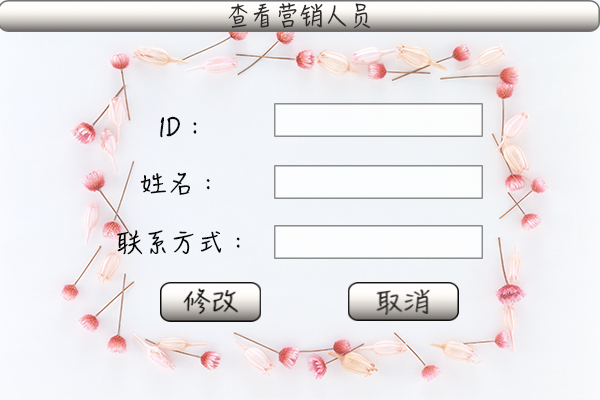
<style>
.page{position:relative;width:600px;height:400px}
.page>*{position:absolute;margin:0}
.t1{font:24px "HanziPenSC-W5";letter-spacing:-0.005em;color:#2d2b2b;text-transform:uppercase}
.t2{font:26.6px "HanziPenSC-W5";letter-spacing:-0.005em;color:#0b0a0a;text-transform:uppercase}
.t3{font:23.6px "HanziPenSC-W5";letter-spacing:-0.005em;color:#0b0a0a;text-transform:uppercase;scale:1.13 1}
.t4{font:23.6px "HanziPenSC-W5";letter-spacing:-0.005em;color:#070707;text-transform:uppercase;scale:1.13 1}
</style>
<div class="page">
<p class="t1" style="left:228px;top:3px;width:142px;height:26px">查看营销人员</p>
<p class="t2" style="left:160px;top:116px;width:37px;height:22px">ID：</p>
<p class="t3" style="left:140px;top:172px;width:70px;height:23px">姓名：</p>
<p class="t4" style="left:117px;top:230px;width:123px;height:25px">联系方式：</p>
</div>
